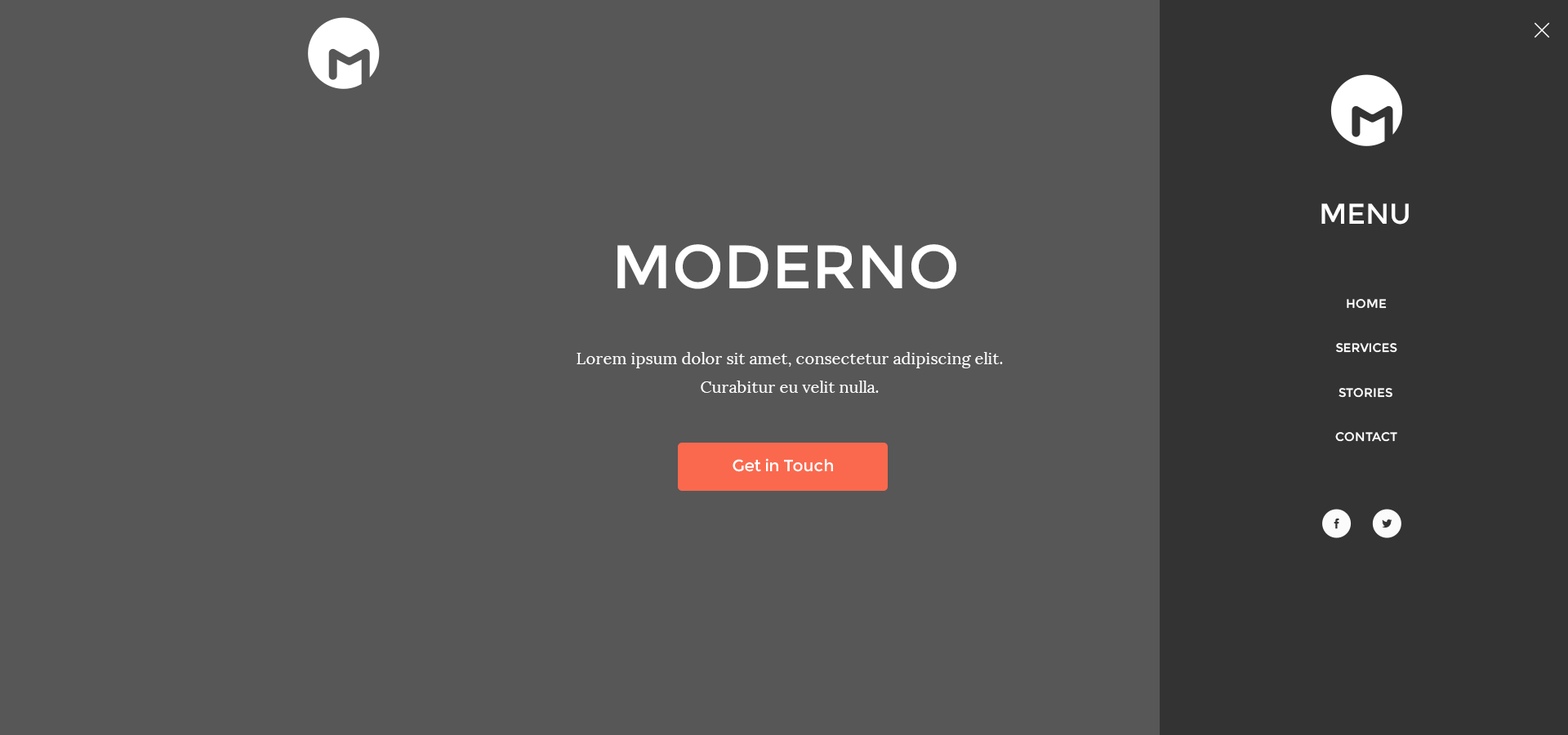
<style>
.page{position:relative;width:1568px;height:735px;background:#575757}
.page>*{position:absolute;margin:0}
.t1{font:28.5px "Montserrat-Regular";color:#ffffff}
.t2{font:61.2px "Montserrat-Regular";color:#ffffff}
.t3{font:12.2px "Montserrat-Regular";color:#ffffff}
.t4{font:16.3px/28.6px "Lora-Regular";color:#ffffff}
.t5{font:16.3px "Montserrat-Regular";color:#ffffff}
</style>
<div class="page">
<p class="t1" style="left:1321px;top:203px;width:88px;height:22px">MENU</p>
<p class="t2" style="left:617px;top:244px;width:339px;height:45px">MODERNO</p>
<p class="t3" style="left:1347px;top:299px;width:40px;height:10px">HOME</p>
<p class="t4" style="left:577px;top:352px;width:426px;height:41px;text-align:center">Lorem ipsum dolor sit amet, consectetur adipiscing elit. <br>Curabitur eu velit nulla.</p>
<p class="t3" style="left:1336px;top:343px;width:61px;height:10px">SERVICES</p>
<p class="t3" style="left:1339px;top:388px;width:53px;height:10px">STORIES</p>
<p class="t3" style="left:1335px;top:432px;width:62px;height:10px">CONTACT</p>
<p class="t5" style="left:733px;top:458px;width:100px;height:14px">Get in Touch</p>
</div>
